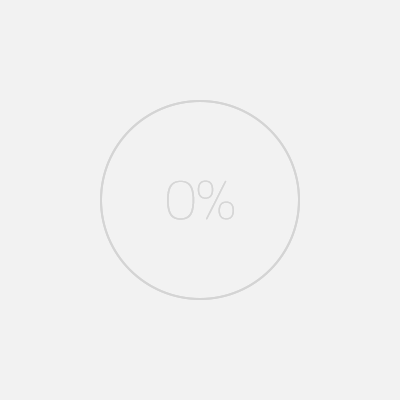
<style>
.page{position:relative;width:400px;height:400px;background:#f2f2f2}
.page>*{position:absolute;margin:0}
.t1{font:56px "Bariol-Light";letter-spacing:-0.04em;color:#d6d6d6}
</style>
<div class="page">
<p class="t1" style="left:167px;top:180px;width:67px;height:40px">0%</p>
<p class="t1" style="left:167px;top:180px;width:67px;height:40px">0%</p>
</div>
